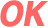
<style>
.page{position:relative;width:48px;height:28px;background:#ffffff}
.page>*{position:absolute;margin:0}
.t1{font:32px "RodinPro-EB";letter-spacing:-0.046em;color:#fa6767;font-style:italic}
</style>
<div class="page">
<p class="t1" style="left:0px;top:0px;width:48px;height:27px">OK</p>
</div>
